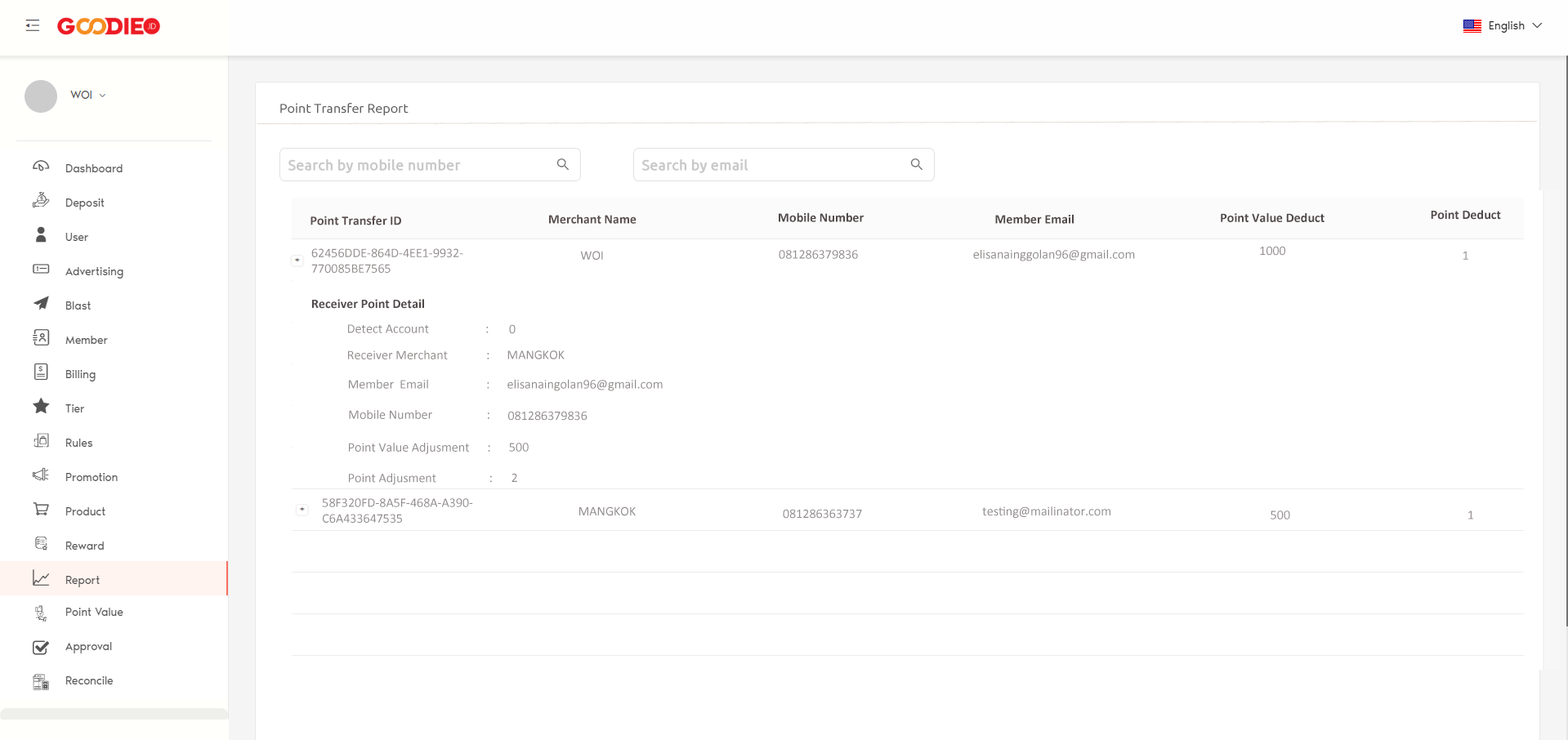
<style>
.page{position:relative;width:1568px;height:740px;background:#ffffff}
.page>*{position:absolute;margin:0}
.t1{font:13.1px "Ubuntu";color:#615f5f}
.t2{font:13.1px "Calibri-Bold";color:#514949}
.t3{font:13.1px "Calibri-Bold";color:#5a4e4e}
.t4{font:13.1px "Calibri";color:#928c8c}
</style>
<div class="page">
<p class="t1" style="left:280px;top:103px;width:129px;height:13px">Point Transfer Report</p>
<p class="t2" style="left:1431px;top:210px;width:70px;height:10px">Point Deduct</p>
<p class="t3" style="left:310px;top:216px;width:91px;height:10px">Point Transfer ID</p>
<p class="t3" style="left:549px;top:214px;width:88px;height:10px">Merchant Name</p>
<p class="t2" style="left:779px;top:212px;width:85px;height:10px">Mobile Number</p>
<p class="t2" style="left:995px;top:214px;width:79px;height:10px">Member Email</p>
<p class="t2" style="left:1221px;top:213px;width:104px;height:9px">Point Value Deduct</p>
<p class="t4" style="left:1260px;top:246px;width:25px;height:10px">1000</p>
<p class="t4" style="left:311px;top:248px;width:152px;height:25px">62456DDE-864D-4EE1-9932-<br>770085BE7565</p>
<p class="t4" style="left:580px;top:251px;width:23px;height:9px">WOI</p>
<p class="t4" style="left:779px;top:250px;width:79px;height:9px">081286379836</p>
<p class="t4" style="left:973px;top:249px;width:162px;height:12px">elisanainggolan96@gmail.com</p>
<p class="t4" style="left:1463px;top:251px;width:5px;height:9px">1</p>
<p class="t2" style="left:312px;top:299px;width:112px;height:10px">Receiver Point Detail</p>
<p class="t4" style="left:348px;top:324px;width:141px;height:9px">Detect Account         :</p>
<p class="t4" style="left:509px;top:324px;width:7px;height:10px">0</p>
<p class="t4" style="left:348px;top:351px;width:141px;height:9px">Receiver Merchant             :</p>
<p class="t4" style="left:507px;top:351px;width:58px;height:9px">MANGKOK</p>
<p class="t4" style="left:349px;top:379px;width:140px;height:10px">Member  Email           :</p>
<p class="t4" style="left:507px;top:379px;width:156px;height:12px">elisanaingolan96@gmail.com</p>
<p class="t4" style="left:349px;top:410px;width:140px;height:9px">Mobile Number           :</p>
<p class="t4" style="left:508px;top:411px;width:79px;height:10px">081286379836</p>
<p class="t4" style="left:349px;top:443px;width:141px;height:11px">Point Value Adjusment      :</p>
<p class="t4" style="left:509px;top:443px;width:20px;height:9px">500</p>
<p class="t4" style="left:349px;top:473px;width:143px;height:12px">Point Adjusment         :</p>
<p class="t4" style="left:511px;top:473px;width:6px;height:9px">2</p>
<p class="t4" style="left:322px;top:498px;width:151px;height:25px">58F320FD-8A5F-468A-A390-<br>C6A433647535</p>
<p class="t4" style="left:579px;top:507px;width:57px;height:9px">MANGKOK</p>
<p class="t4" style="left:783px;top:509px;width:79px;height:10px">081286363737</p>
<p class="t4" style="left:982px;top:507px;width:128px;height:11px">testing@mailinator.com</p>
<p class="t4" style="left:1271px;top:511px;width:19px;height:9px">500</p>
<p class="t4" style="left:1468px;top:511px;width:5px;height:9px">1</p>
</div>
